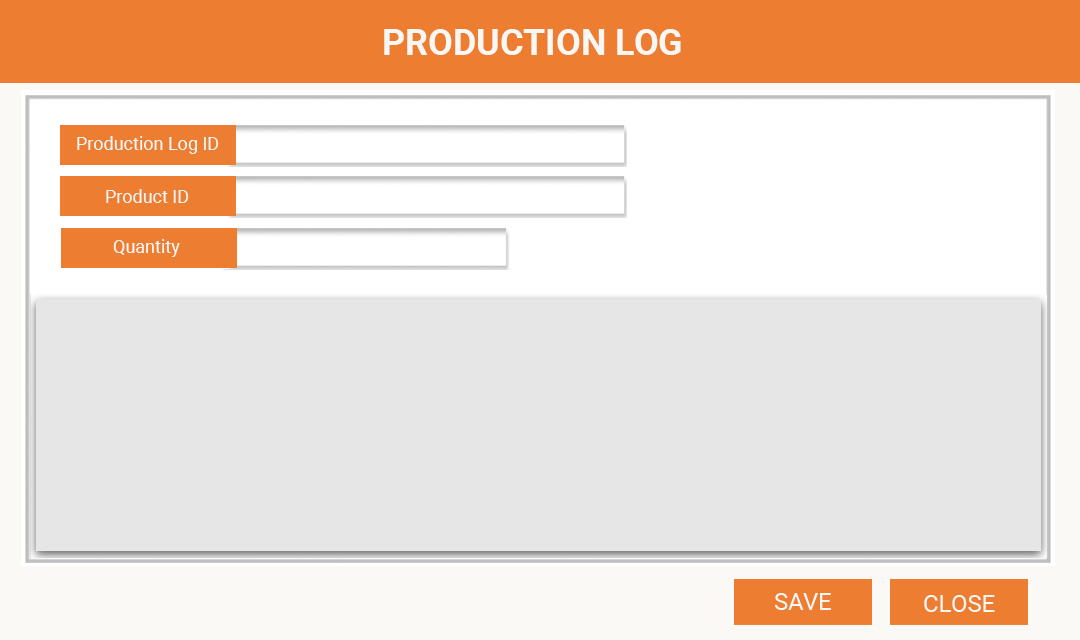
<style>
.page{position:relative;width:1080px;height:640px;background:#e7e6e6}
.page>*{position:absolute;margin:0}
.t1{font:36px "Roboto-Bold";color:#f9f7f3}
.t2{font:18px "Roboto-Regular";color:#f9f7f3}
</style>
<div class="page">
<p class="t1" style="left:384px;top:29px;width:297px;height:26px">PRODUCTION LOG</p>
<p class="t2" style="left:77px;top:136px;width:142px;height:18px">Production Log ID</p>
<p class="t2" style="left:106px;top:189px;width:83px;height:14px">Product ID</p>
<p class="t2" style="left:113px;top:239px;width:67px;height:18px">Quantity</p>
</div>
